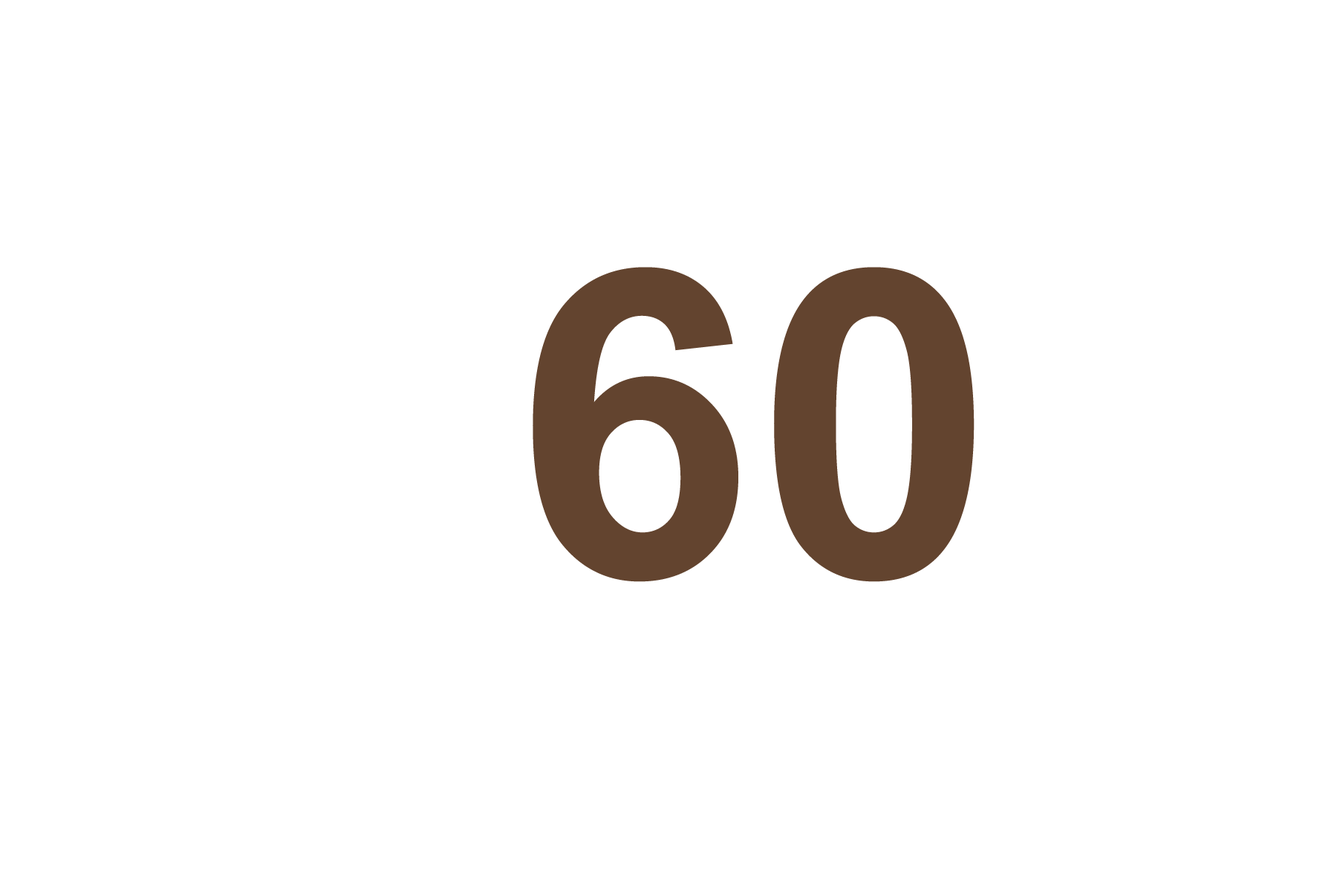
<style>
.page{position:relative;width:1337px;height:892px;background:#ffffff}
.page>*{position:absolute;margin:0}
.t1{font:429.6px "Arial-BoldMT";color:#63442f}
</style>
<div class="page">
<p class="t1" style="left:533px;top:267px;width:442px;height:315px">60</p>
</div>
